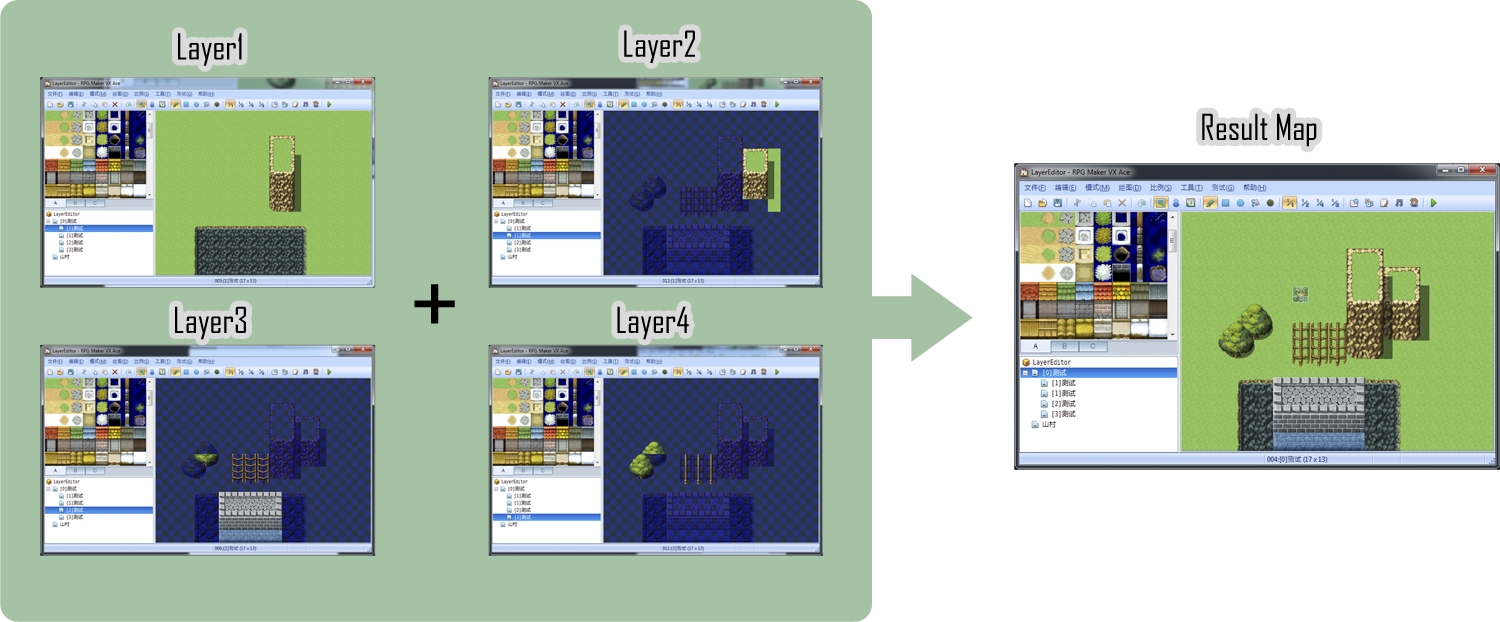
<style>
.page{position:relative;width:1500px;height:622px;background:#ffffff}
.page>*{position:absolute;margin:0}
.t1{font:34.5px "AgencyFB-Reg";color:#000000}
.t2{font:116.8px "AgencyFB-Reg";color:#000000}
</style>
<div class="page">
<p class="t1" style="left:624px;top:30px;width:71px;height:33px">Layer2</p>
<p class="t1" style="left:178px;top:33px;width:64px;height:33px">Layer1</p>
<p class="t1" style="left:1202px;top:113px;width:115px;height:34px">Result Map</p>
<p class="t2" style="left:414px;top:284px;width:41px;height:40px">+</p>
<p class="t1" style="left:175px;top:306px;width:71px;height:34px">Layer3</p>
<p class="t1" style="left:617px;top:306px;width:72px;height:34px">Layer4</p>
</div>
